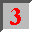
<style>
.page{position:relative;width:32px;height:32px;background:#bbbbbb}
.page>*{position:absolute;margin:0}
.t1{font:25px "TimesNewRomanPS-BoldMT";color:#ff0000}
</style>
<div class="page">
<p class="t1" style="left:10px;top:8px;width:11px;height:17px">3</p>
</div>
